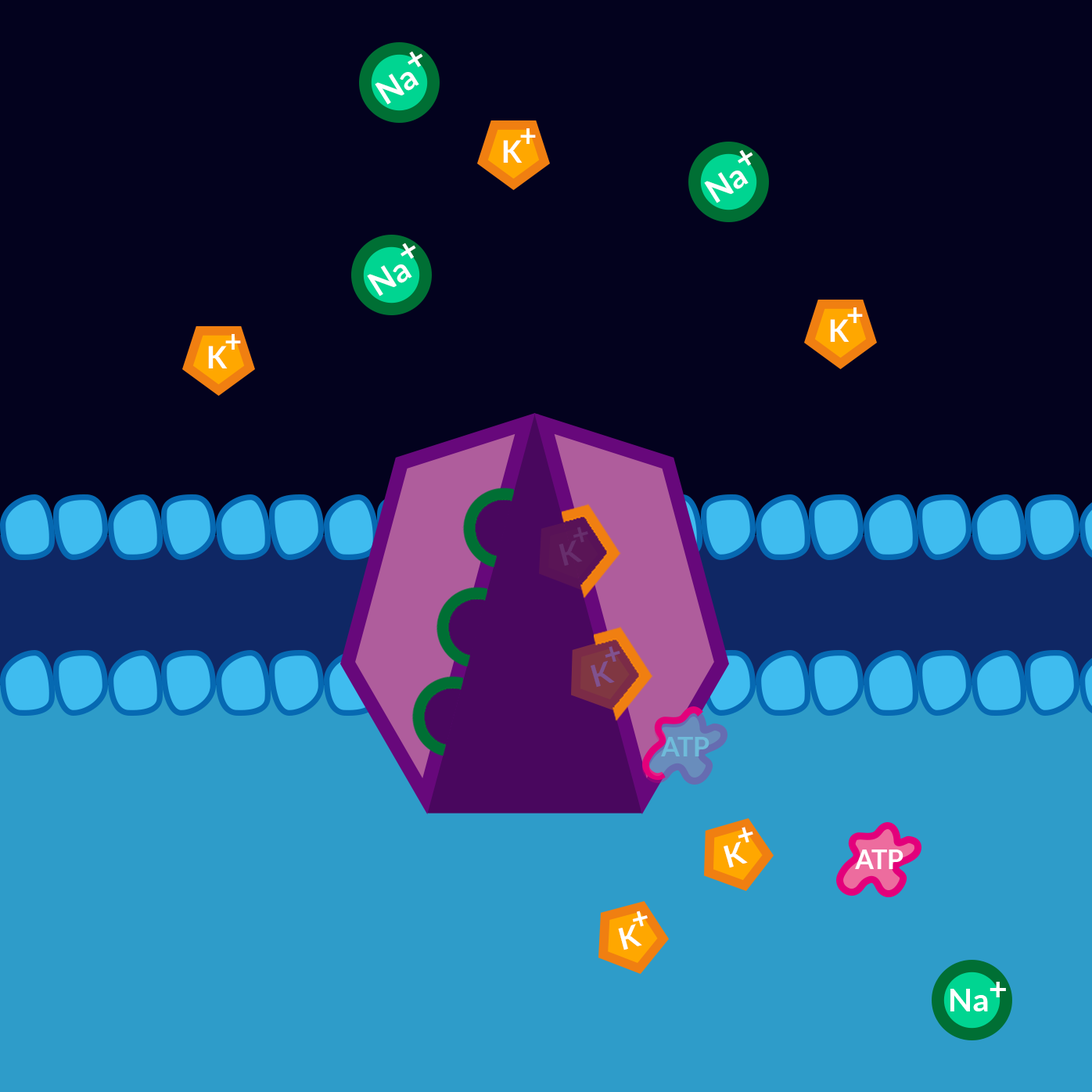
<style>
.page{position:relative;width:1092px;height:1092px;background:#03021e}
.page>*{position:absolute;margin:0}
.t1{font:32.4px "Lato-Bold";color:#ffffff}
.t2{font:30.3px "Lato-Bold";color:#ffffff}
.t3{font:30.3px "Lato-Bold";color:#672e6c}
.t4{font:30.3px "Lato-Bold";color:#80528f}
.t5{font:26.6px "Lato-Bold";color:#6fbbda}
.t6{font:26.6px "Lato-Bold";color:#ffffff}
</style>
<div class="page">
<p class="t1" style="left:408px;top:51px;width:15px;height:16px;rotate:-32deg">+</p>
<p class="t1" style="left:375px;top:72px;width:44px;height:33px;rotate:-32deg">Na</p>
<p class="t2" style="left:520px;top:128px;width:16px;height:16px">+</p>
<p class="t2" style="left:503px;top:140px;width:20px;height:23px">K</p>
<p class="t1" style="left:738px;top:149px;width:15px;height:17px;rotate:-32deg">+</p>
<p class="t1" style="left:704px;top:171px;width:45px;height:32px;rotate:-32deg">Na</p>
<p class="t1" style="left:400px;top:242px;width:16px;height:17px;rotate:-32deg">+</p>
<p class="t1" style="left:367px;top:264px;width:45px;height:32px;rotate:-32deg">Na</p>
<p class="t2" style="left:847px;top:307px;width:16px;height:16px">+</p>
<p class="t2" style="left:830px;top:319px;width:19px;height:23px">K</p>
<p class="t2" style="left:225px;top:334px;width:16px;height:16px">+</p>
<p class="t2" style="left:208px;top:346px;width:20px;height:22px">K</p>
<p class="t3" style="left:573px;top:526px;width:15px;height:17px;rotate:-15deg">+</p>
<p class="t3" style="left:559px;top:540px;width:24px;height:26px;rotate:-15deg">K</p>
<p class="t4" style="left:605px;top:646px;width:15px;height:16px;rotate:-16deg">+</p>
<p class="t4" style="left:591px;top:660px;width:24px;height:28px;rotate:-16deg">K</p>
<p class="t5" style="left:661px;top:737px;width:48px;height:19px">ATP</p>
<p class="t2" style="left:738px;top:827px;width:15px;height:15px;rotate:-16deg">+</p>
<p class="t2" style="left:724px;top:841px;width:24px;height:27px;rotate:-16deg">K</p>
<p class="t6" style="left:855px;top:849px;width:48px;height:20px">ATP</p>
<p class="t2" style="left:632px;top:911px;width:16px;height:16px;rotate:-15deg">+</p>
<p class="t2" style="left:618px;top:924px;width:24px;height:26px;rotate:-15deg">K</p>
<p class="t1" style="left:950px;top:989px;width:38px;height:22px">Na</p>
<p class="t1" style="left:990px;top:982px;width:16px;height:15px">+</p>
</div>
